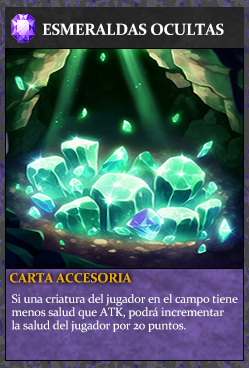
<style>
.page{position:relative;width:249px;height:368px}
.page>*{position:absolute;margin:0}
.t1{font:16px "Constantia-Bold";letter-spacing:-0.02em;color:#ffffff}
.t2{font:13.3px "Constantia-Bold";letter-spacing:-0.02em;color:#f2ac05}
.t3{font:12px/13.3px "Constantia";letter-spacing:-0.02em;color:#ffffff}
</style>
<div class="page">
<p class="t1" style="left:42px;top:23px;width:182px;height:12px">ESMERALDAS OCULTAS</p>
<p class="t2" style="left:10px;top:273px;width:122px;height:10px">CARTA ACCESORIA</p>
<p class="t3" style="left:11px;top:294px;width:227px;height:39px">Si una criatura del jugador en el campo tiene<br>menos salud que ATK, podrá incrementar<br>la salud del jugador por 20 puntos.</p>
</div>
